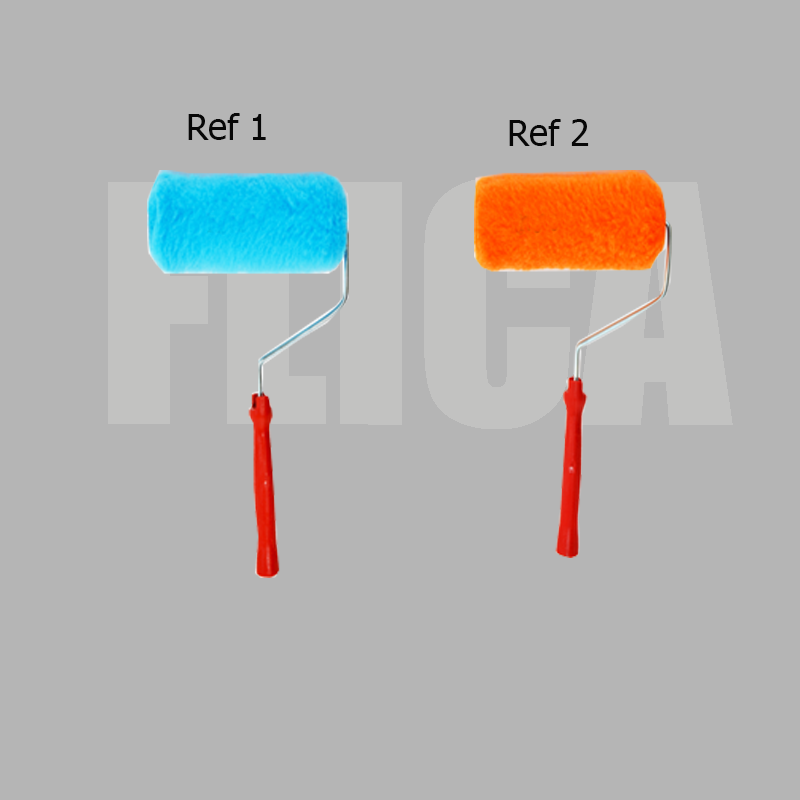
<style>
.page{position:relative;width:800px;height:800px;background:#b5b5b5}
.page>*{position:absolute;margin:0}
.t1{font:36px "Tahoma";color:#070707}
</style>
<div class="page">
<p class="t1" style="left:188px;top:113px;width:78px;height:27px">Ref 1</p>
<p class="t1" style="left:509px;top:119px;width:80px;height:27px">Ref 2</p>
</div>
